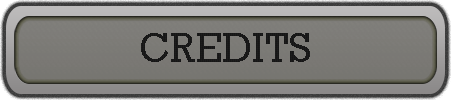
<style>
.page{position:relative;width:451px;height:100px}
.page>*{position:absolute;margin:0}
.t1{font:41.7px "Rockwell";color:#171717}
</style>
<div class="page">
<p class="t1" style="left:141px;top:33px;width:169px;height:29px">CREDITS</p>
</div>
